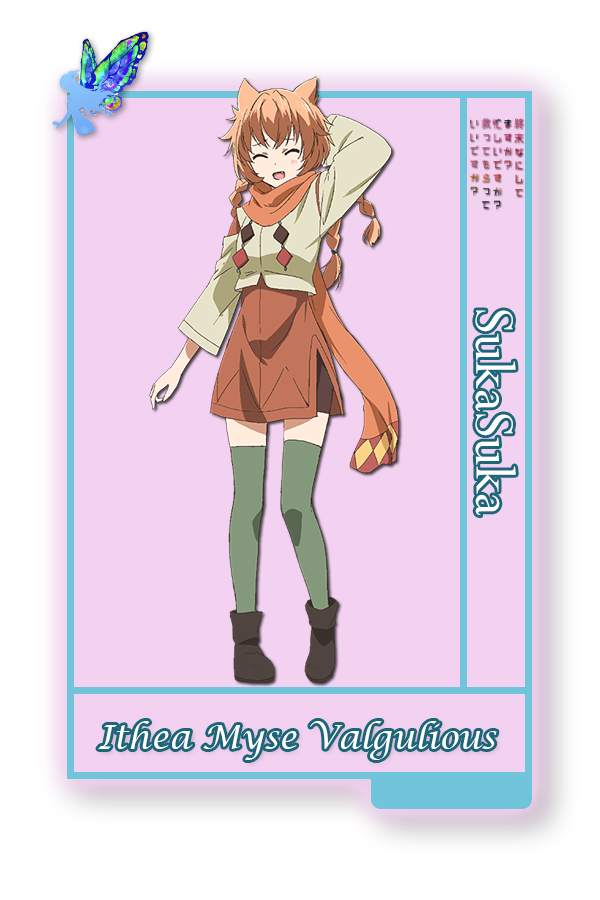
<style>
.page{position:relative;width:600px;height:900px;background:#f3d2f1}
.page>*{position:absolute;margin:0}
.t1{font:62.5px "Perpetua";color:#ffffff}
.t2{font:33.3px "LucidaCalligraphy-Italic";color:#ffffff}
</style>
<div class="page">
<p class="t1" style="left:475px;top:310px;width:41px;height:206px;rotate:90deg">SukaSuka</p>
<p class="t2" style="left:98px;top:721px;width:399px;height:39px">Ithea Myse Valgulious</p>
</div>
